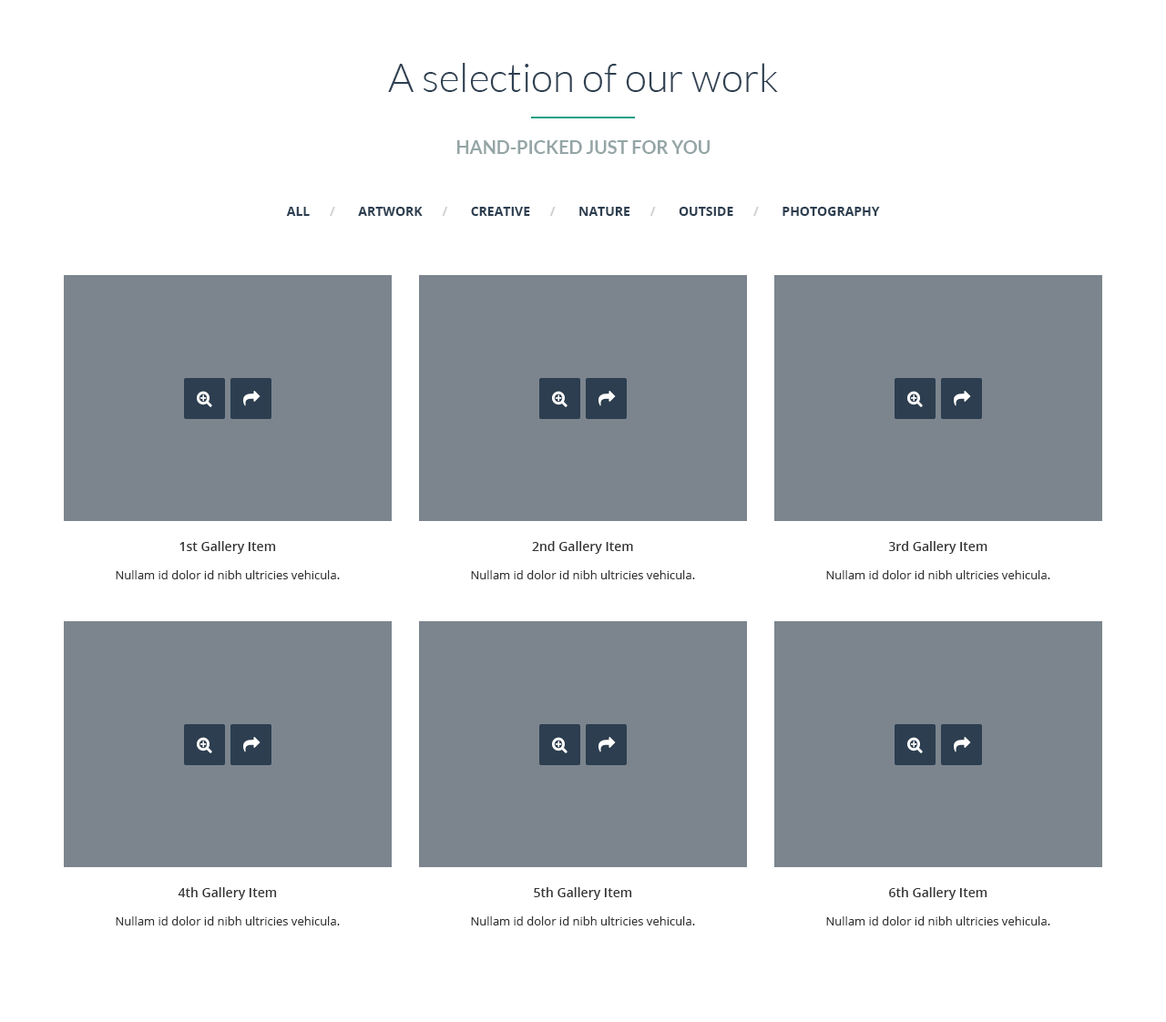
<style>
.page{position:relative;width:1166px;height:1022px;background:#ffffff}
.page>*{position:absolute;margin:0}
.t1{font:40.1px "Lato-Light";color:#2e4052}
.t2{font:18.2px "Lato-Bold";color:#95a5a6}
.t3{font:12.8px "OpenSans-Bold";color:#2c3e50}
.t4{font:12.8px "OpenSans-Bold";color:#d0d0d0}
.t5{font:12.8px "OpenSans-Semibold";color:#333333}
.t6{font:11.8px "OpenSans";color:#333333}
</style>
<div class="page">
<p class="t1" style="left:388px;top:63px;width:390px;height:29px">A selection of our work</p>
<p class="t2" style="left:457px;top:140px;width:253px;height:14px">HAND-PICKED JUST FOR YOU</p>
<p class="t3" style="left:286px;top:207px;width:594px;height:9px">ALL      <span class="t4">/</span>       ARTWORK      <span class="t4">/ </span>      CREATIVE      <span class="t4">/</span>       NATURE      <span class="t4">/</span>       OUTSIDE      <span class="t4">/</span>       PHOTOGRAPHY</p>
<p class="t5" style="left:180px;top:541px;width:96px;height:13px">1st Gallery Item</p>
<p class="t5" style="left:532px;top:541px;width:101px;height:13px">2nd Gallery Item</p>
<p class="t5" style="left:888px;top:541px;width:100px;height:13px">3rd Gallery Item</p>
<p class="t6" style="left:116px;top:570px;width:224px;height:10px">Nullam id dolor id nibh ultricies vehicula.</p>
<p class="t6" style="left:471px;top:570px;width:224px;height:10px">Nullam id dolor id nibh ultricies vehicula.</p>
<p class="t6" style="left:826px;top:570px;width:225px;height:10px">Nullam id dolor id nibh ultricies vehicula.</p>
<p class="t5" style="left:178px;top:888px;width:99px;height:12px">4th Gallery Item</p>
<p class="t5" style="left:534px;top:888px;width:98px;height:12px">5th Gallery Item</p>
<p class="t5" style="left:889px;top:888px;width:99px;height:12px">6th Gallery Item</p>
<p class="t6" style="left:116px;top:917px;width:224px;height:9px">Nullam id dolor id nibh ultricies vehicula.</p>
<p class="t6" style="left:471px;top:917px;width:224px;height:9px">Nullam id dolor id nibh ultricies vehicula.</p>
<p class="t6" style="left:826px;top:917px;width:225px;height:9px">Nullam id dolor id nibh ultricies vehicula.</p>
</div>
